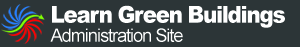
<style>
.page{position:relative;width:300px;height:47px;background:#2c3537}
.page>*{position:absolute;margin:0}
.t1{font:23.6px "Arial-Black";letter-spacing:-0.06em;color:#ffffff;scale:0.91 1}
.t2{font:18.3px "ArialMT";letter-spacing:-0.06em;color:#ffffff}
</style>
<div class="page">
<p class="t1" style="left:52px;top:5px;width:233px;height:23px">Learn Green Buildings</p>
<p class="t2" style="left:50px;top:28px;width:133px;height:14px">Administration Site</p>
</div>
